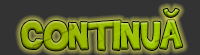
<style>
.page{position:relative;width:200px;height:55px;background:#333333}
.page>*{position:absolute;margin:0}
.t1{font:50px "Brady-Bunch"}
</style>
<div class="page">
<p class="t1" style="left:21px;top:20px;width:162px;height:31px">CONTINUA</p>
</div>
